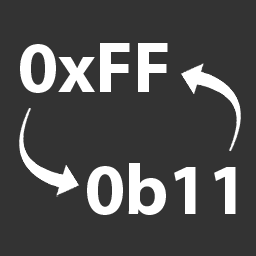
<style>
.page{position:relative;width:256px;height:256px;background:#333333}
.page>*{position:absolute;margin:0}
.t1{font:72px "MyriadPro-Bold";color:#ffffff}
</style>
<div class="page">
<p class="t1" style="left:20px;top:43px;width:148px;height:50px">0xFF</p>
<p class="t1" style="left:87px;top:163px;width:149px;height:52px">0b11</p>
</div>
